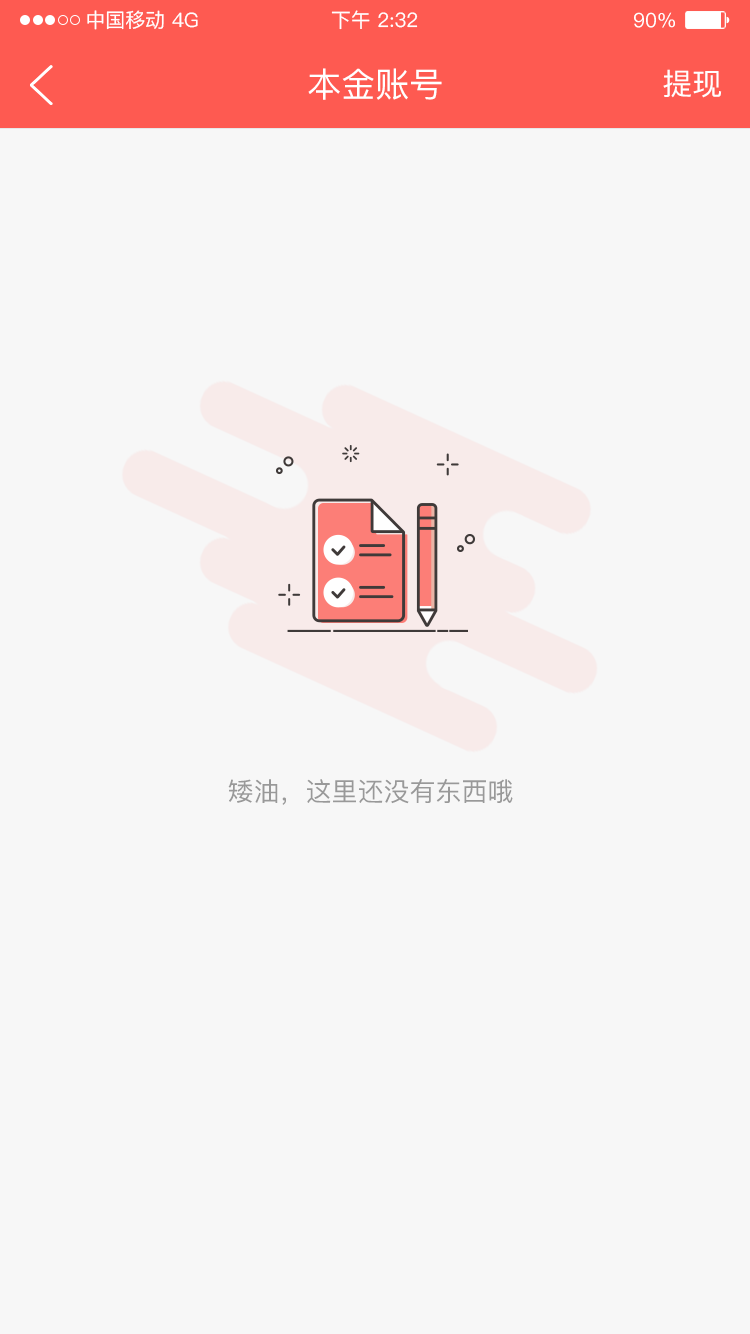
<style>
.page{position:relative;width:750px;height:1334px;background:#f7f7f7}
.page>*{position:absolute;margin:0}
.t1{font:20px "PingFang-SC-Medium";color:#ffffff}
.t2{font:34px "PingFang-SC-Medium";color:#ffffff}
.t3{font:30px "PingFang-SC-Medium";color:#fffefe}
.t4{font:26px "PingFang-SC-Medium";color:#999999}
</style>
<div class="page">
<p class="t1" style="left:87px;top:10px;width:77px;height:20px">中国移动</p>
<p class="t1" style="left:172px;top:12px;width:26px;height:16px">4G</p>
<p class="t1" style="left:331px;top:10px;width:87px;height:20px">下午 2:32</p>
<p class="t1" style="left:634px;top:12px;width:41px;height:16px">90%</p>
<p class="t2" style="left:308px;top:68px;width:134px;height:32px">本金账号</p>
<p class="t3" style="left:663px;top:69px;width:59px;height:29px">提现</p>
<p class="t4" style="left:228px;top:779px;width:285px;height:26px">矮油，这里还没有东西哦</p>
</div>
